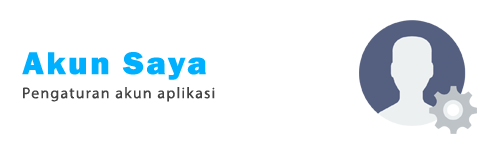
<style>
.page{position:relative;width:500px;height:150px;background:#ffffff}
.page>*{position:absolute;margin:0}
.t1{font:32.5px "FranklinGothic-Heavy";letter-spacing:0.075em;color:#00b0ff;scale:1.04 1}
.t2{font:15.5px "MyriadPro-Regular";letter-spacing:0.075em;color:#444444}
</style>
<div class="page">
<p class="t1" style="left:22px;top:52px;width:184px;height:28px">Akun Saya</p>
<p class="t2" style="left:23px;top:87px;width:192px;height:15px">Pengaturan akun aplikasi</p>
</div>
